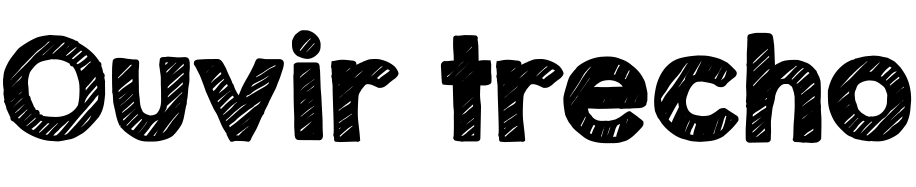
<style>
.page{position:relative;width:916px;height:187px;background:#ffffff}
.page>*{position:absolute;margin:0}
.t1{font:125px "KGSecondChancesSketch";color:#000000;font-weight:bold}
</style>
<div class="page">
<p class="t1" style="left:3px;top:30px;width:909px;height:114px">Ouvir trecho</p>
</div>
